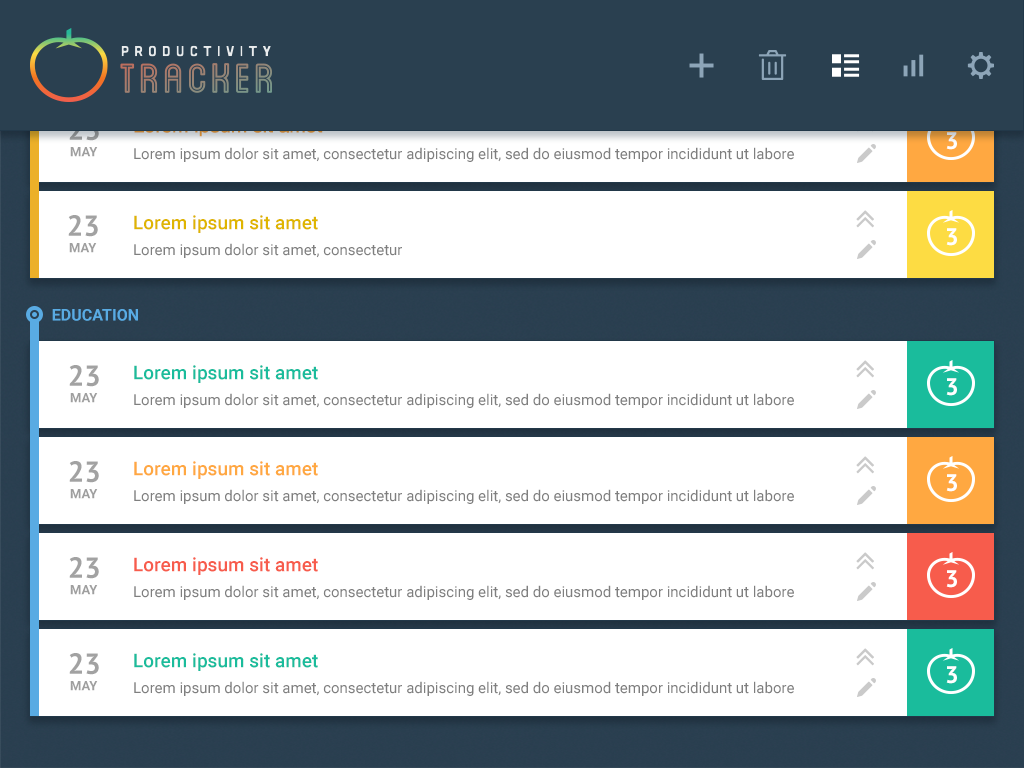
<style>
.page{position:relative;width:1024px;height:768px;background:#ffffff}
.page>*{position:absolute;margin:0}
.t1{font:19px "HelveticaNeue-Medium";color:#2a4050}
.t2{font:24px "PTSans-Bold";color:#ffffff}
.t3{font:13px "Roboto-Bold";color:#9f9f9f}
.t4{font:15px "Roboto-Regular";color:#7f7f7f}
.t5{font:29px "PTSans-Bold";color:#a2a2a2}
.t6{font:19px "Roboto-Medium";color:#dfb500}
.t7{font:16px "Roboto-Bold";color:#59abe3}
.t8{font:19px "Roboto-Medium";color:#1abc9c}
.t9{font:19px "Roboto-Medium";color:#ffa841}
.t10{font:19px "Roboto-Medium";color:#f75c4c}
</style>
<div class="page">
<p class="t1" style="left:134px;top:119px;width:189px;height:18px">Lorem ipsum sit amet</p>
<p class="t2" style="left:946px;top:132px;width:11px;height:18px">3</p>
<p class="t3" style="left:70px;top:147px;width:28px;height:10px">MAY</p>
<p class="t4" style="left:134px;top:147px;width:660px;height:15px">Lorem ipsum dolor sit amet, consectetur adipiscing elit, sed do eiusmod tempor incididunt ut labore</p>
<p class="t5" style="left:68px;top:215px;width:30px;height:22px">23</p>
<p class="t6" style="left:134px;top:215px;width:184px;height:18px">Lorem ipsum sit amet</p>
<p class="t2" style="left:946px;top:228px;width:11px;height:18px">3</p>
<p class="t3" style="left:69px;top:243px;width:28px;height:10px">MAY</p>
<p class="t4" style="left:134px;top:243px;width:268px;height:15px">Lorem ipsum dolor sit amet, consectetur</p>
<p class="t7" style="left:52px;top:309px;width:86px;height:12px">EDUCATION</p>
<p class="t5" style="left:69px;top:365px;width:30px;height:22px">23</p>
<p class="t8" style="left:134px;top:365px;width:184px;height:18px">Lorem ipsum sit amet</p>
<p class="t2" style="left:946px;top:378px;width:11px;height:18px">3</p>
<p class="t3" style="left:70px;top:393px;width:28px;height:10px">MAY</p>
<p class="t4" style="left:134px;top:393px;width:660px;height:15px">Lorem ipsum dolor sit amet, consectetur adipiscing elit, sed do eiusmod tempor incididunt ut labore</p>
<p class="t5" style="left:69px;top:461px;width:30px;height:22px">23</p>
<p class="t9" style="left:134px;top:461px;width:184px;height:18px">Lorem ipsum sit amet</p>
<p class="t2" style="left:946px;top:474px;width:11px;height:18px">3</p>
<p class="t3" style="left:70px;top:489px;width:28px;height:10px">MAY</p>
<p class="t4" style="left:134px;top:489px;width:660px;height:15px">Lorem ipsum dolor sit amet, consectetur adipiscing elit, sed do eiusmod tempor incididunt ut labore</p>
<p class="t5" style="left:69px;top:557px;width:30px;height:22px">23</p>
<p class="t10" style="left:134px;top:557px;width:184px;height:18px">Lorem ipsum sit amet</p>
<p class="t2" style="left:946px;top:570px;width:11px;height:18px">3</p>
<p class="t3" style="left:70px;top:585px;width:28px;height:10px">MAY</p>
<p class="t4" style="left:134px;top:585px;width:660px;height:15px">Lorem ipsum dolor sit amet, consectetur adipiscing elit, sed do eiusmod tempor incididunt ut labore</p>
<p class="t5" style="left:69px;top:653px;width:30px;height:22px">23</p>
<p class="t8" style="left:134px;top:653px;width:184px;height:18px">Lorem ipsum sit amet</p>
<p class="t2" style="left:946px;top:666px;width:11px;height:18px">3</p>
<p class="t3" style="left:70px;top:681px;width:28px;height:10px">MAY</p>
<p class="t4" style="left:134px;top:681px;width:660px;height:15px">Lorem ipsum dolor sit amet, consectetur adipiscing elit, sed do eiusmod tempor incididunt ut labore</p>
</div>
